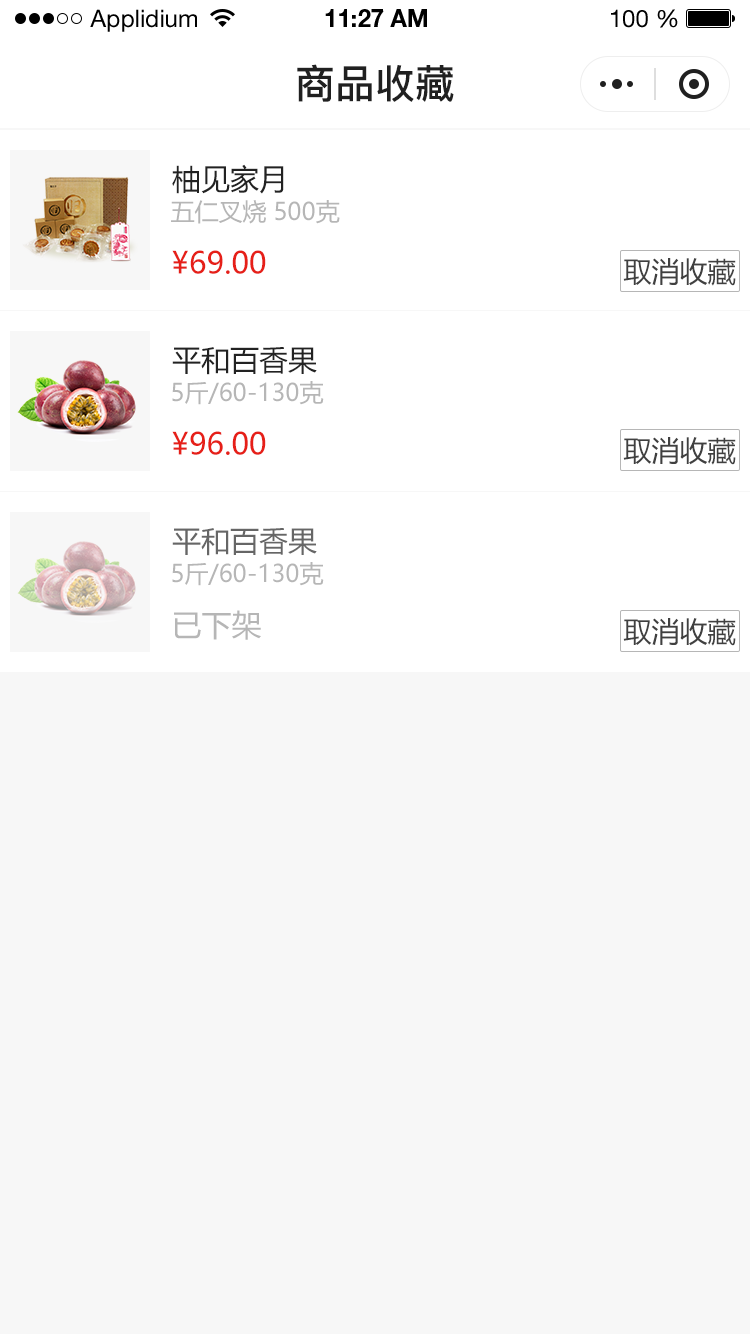
<style>
.page{position:relative;width:750px;height:1334px;background:#f7f7f7}
.page>*{position:absolute;margin:0}
.t1{font:24px "HelveticaNeueLTStd-Roman";color:#000000}
.t2{font:24px "HelveticaNeueLTStd-Bd";color:#000000}
.t3{font:40px "PingFang-SC-Bold";color:#202020;text-transform:uppercase}
.t4{font:29px "MicrosoftYaHei";color:#222222;text-transform:uppercase}
.t5{font:24px "MicrosoftYaHei";color:#b6b6b6;text-transform:uppercase}
.t6{font:30px "MicrosoftYaHei";color:#e61f18;text-transform:uppercase}
.t7{font:28px "MicrosoftYaHei";color:#404040;text-transform:uppercase}
.t8{font:29px "MicrosoftYaHei";color:#666666;text-transform:uppercase}
.t9{font:30px "MicrosoftYaHei";color:#b6b6b6;text-transform:uppercase}
</style>
<div class="page">
<p class="t1" style="left:90px;top:9px;width:107px;height:23px">Applidium</p>
<p class="t2" style="left:325px;top:9px;width:102px;height:18px">11:27 AM</p>
<p class="t1" style="left:611px;top:9px;width:67px;height:19px">100 %</p>
<p class="t3" style="left:297px;top:64px;width:157px;height:38px">商品收藏</p>
<p class="t4" style="left:172px;top:164px;width:112px;height:30px">柚见家月</p>
<p class="t5" style="left:171px;top:200px;width:169px;height:24px">五仁叉烧 500克</p>
<p class="t6" style="left:172px;top:250px;width:94px;height:24px">¥69.00</p>
<p class="t7" style="left:623px;top:258px;width:113px;height:28px">取消收藏</p>
<p class="t4" style="left:172px;top:347px;width:145px;height:28px">平和百香果</p>
<p class="t5" style="left:172px;top:381px;width:152px;height:24px">5斤/60-130克</p>
<p class="t6" style="left:172px;top:431px;width:94px;height:24px">¥96.00</p>
<p class="t7" style="left:623px;top:437px;width:113px;height:28px">取消收藏</p>
<p class="t8" style="left:172px;top:528px;width:145px;height:28px">平和百香果</p>
<p class="t5" style="left:172px;top:562px;width:152px;height:24px">5斤/60-130克</p>
<p class="t9" style="left:174px;top:610px;width:87px;height:30px">已下架</p>
<p class="t7" style="left:623px;top:618px;width:113px;height:28px">取消收藏</p>
</div>
